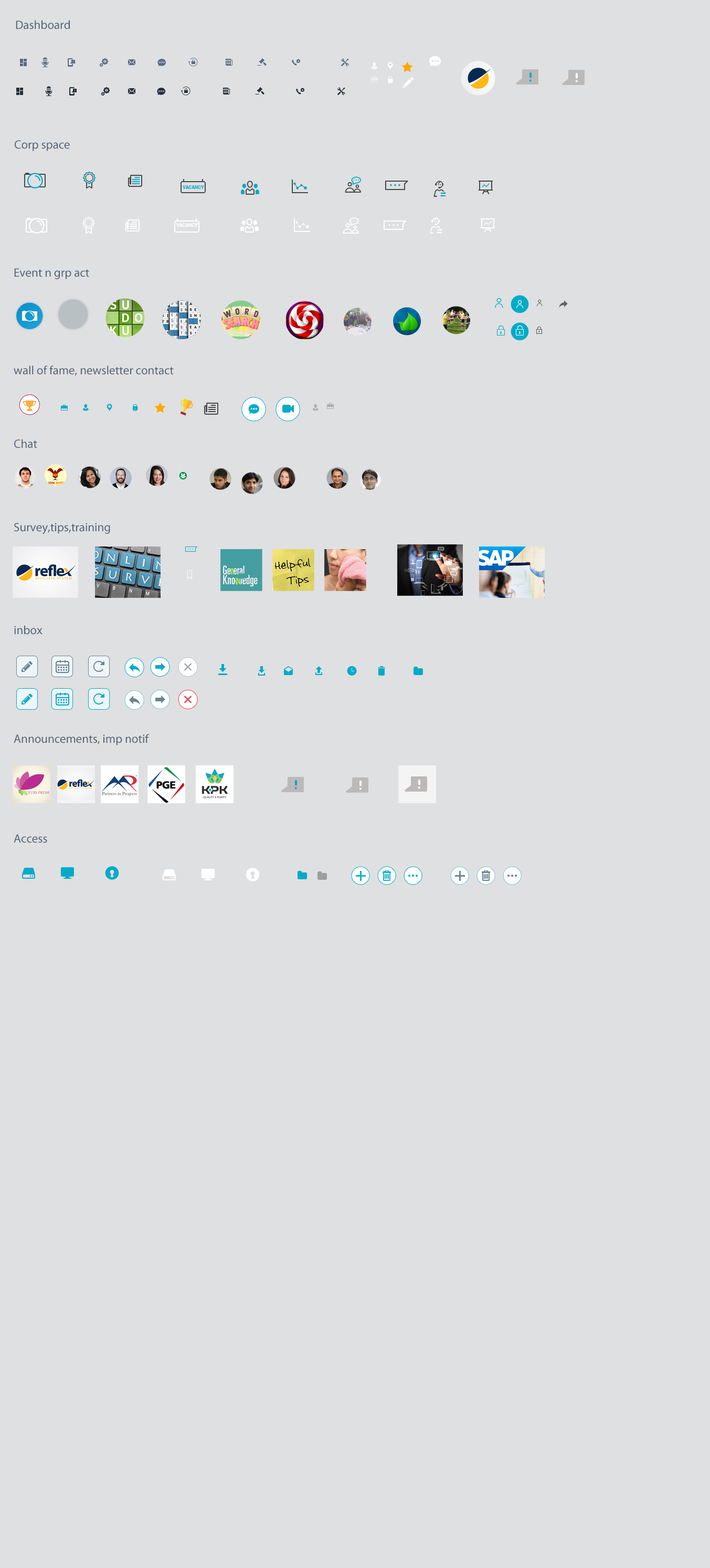
<style>
.page{position:relative;width:710px;height:1568px;background:#dfe0e1}
.page>*{position:absolute;margin:0}
.t1{font:12.1px "MyriadPro-Regular";color:#516073}
.t2{font:4.7px "Roboto-Black";color:#01abc8;text-transform:uppercase}
.t3{font:4.7px "Roboto-Black";color:#ffffff;text-transform:uppercase}
</style>
<div class="page">
<p class="t1" style="left:16px;top:20px;width:54px;height:9px">Dashboard</p>
<p class="t1" style="left:15px;top:140px;width:55px;height:11px">Corp space</p>
<p class="t2" style="left:183px;top:185px;width:21px;height:4px">Vacancy</p>
<p class="t3" style="left:176px;top:223px;width:22px;height:4px">Vacancy</p>
<p class="t1" style="left:14px;top:268px;width:75px;height:11px">Event n grp act</p>
<p class="t1" style="left:14px;top:365px;width:160px;height:11px">wall of fame, newsletter contact</p>
<p class="t1" style="left:14px;top:439px;width:23px;height:9px">Chat</p>
<p class="t1" style="left:14px;top:523px;width:96px;height:11px">Survey,tips,training</p>
<p class="t1" style="left:14px;top:625px;width:29px;height:10px">inbox</p>
<p class="t1" style="left:14px;top:734px;width:135px;height:11px">Announcements, imp notif</p>
<p class="t1" style="left:14px;top:834px;width:33px;height:9px">Access</p>
</div>
